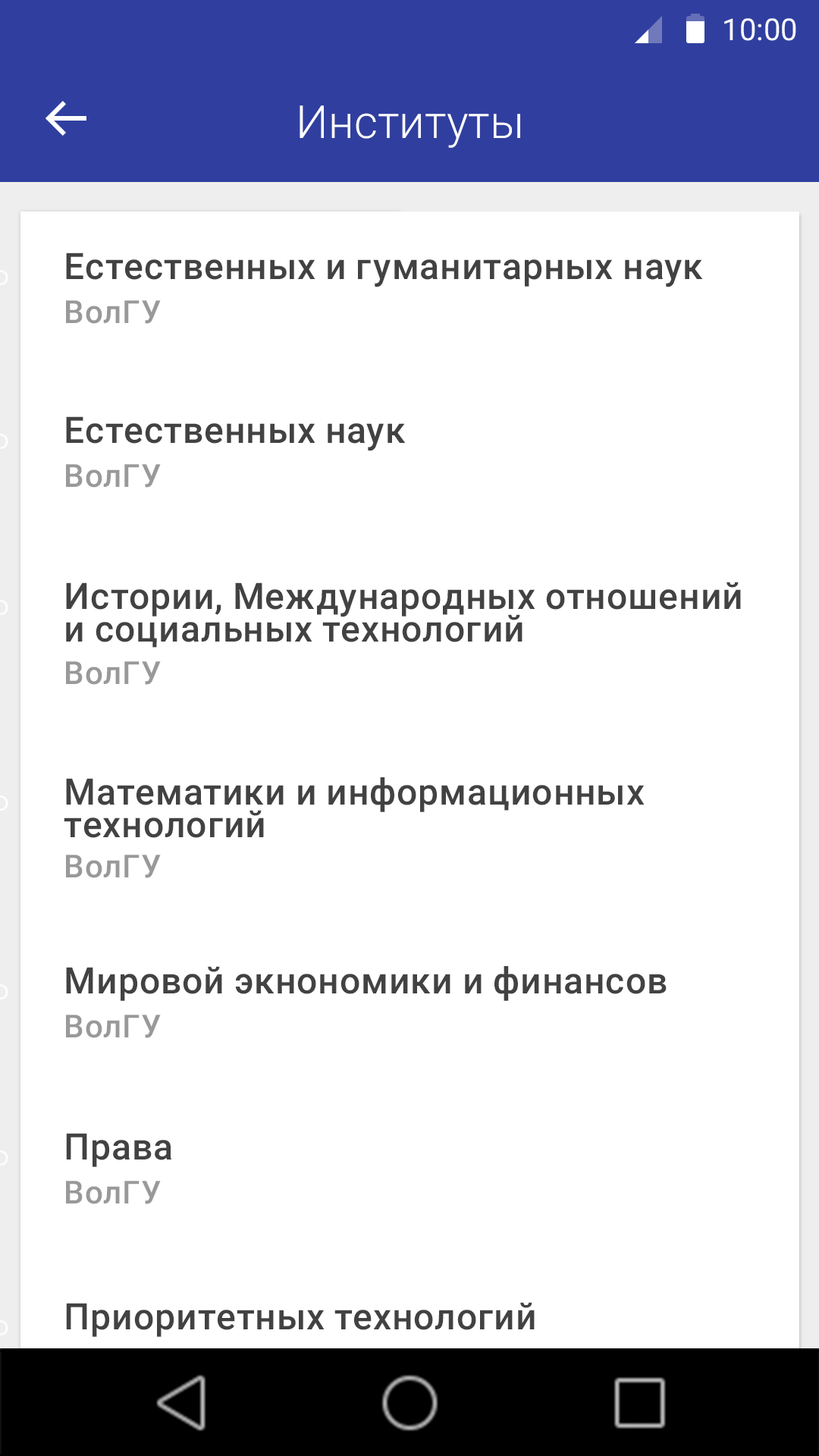
<style>
.page{position:relative;width:819px;height:1456px;background:#ffffff}
.page>*{position:absolute;margin:0}
.t1{font:30.3px "Roboto-Regular";color:#ffffff}
.t2{font:45.5px "Roboto-Light";color:#ffffff}
.t3{font:36.5px "Roboto-Medium";letter-spacing:0.01em;color:#424242}
.t4{font:31.9px "Roboto-Medium";letter-spacing:0.01em;color:#999999}
.t5{font:36.5px/32.8px "Roboto-Medium";letter-spacing:0.01em;color:#424242}
</style>
<div class="page">
<p class="t1" style="left:724px;top:18px;width:72px;height:23px">10:00</p>
<p class="t2" style="left:300px;top:105px;width:220px;height:43px">Институты</p>
<p class="t3" style="left:66px;top:253px;width:637px;height:34px">Естественных и гуманитарных наук</p>
<p class="t4" style="left:66px;top:300px;width:95px;height:24px">ВолГУ</p>
<p class="t3" style="left:66px;top:416px;width:340px;height:35px">Естественных наук</p>
<p class="t4" style="left:66px;top:464px;width:95px;height:24px">ВолГУ</p>
<p class="t5" style="left:66px;top:582px;width:675px;height:66px">Истории, Международных отношений и социальных технологий</p>
<p class="t4" style="left:66px;top:661px;width:95px;height:24px">ВолГУ</p>
<p class="t3" style="left:64px;top:777px;width:581px;height:61px">Математики и информационных технологий</p>
<p class="t4" style="left:66px;top:855px;width:95px;height:23px">ВолГУ</p>
<p class="t3" style="left:66px;top:966px;width:601px;height:35px">Мировой экнономики и финансов</p>
<p class="t4" style="left:66px;top:1015px;width:95px;height:23px">ВолГУ</p>
<p class="t3" style="left:66px;top:1133px;width:105px;height:34px">Права</p>
<p class="t4" style="left:66px;top:1181px;width:95px;height:23px">ВолГУ</p>
<p class="t3" style="left:66px;top:1302px;width:469px;height:35px">Приоритетных технологий</p>
</div>
